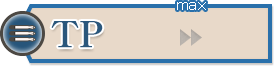
<style>
.page{position:relative;width:274px;height:69px;background:#e8d9c9}
.page>*{position:absolute;margin:0}
.t1{font:36px "RyuminPro-ExBold";color:#2a577c}
</style>
<div class="page">
<p class="t1" style="left:51px;top:21px;width:52px;height:27px">TP</p>
</div>
